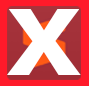
<style>
.page{position:relative;width:89px;height:86px;background:#ffffff}
.page>*{position:absolute;margin:0}
.t1{font:86.5px "AgencyFB-Bold";letter-spacing:0.05em;color:#ffffff;scale:2.05 1}
</style>
<div class="page">
<p class="t1" style="left:7px;top:9px;width:74px;height:66px">X</p>
</div>
